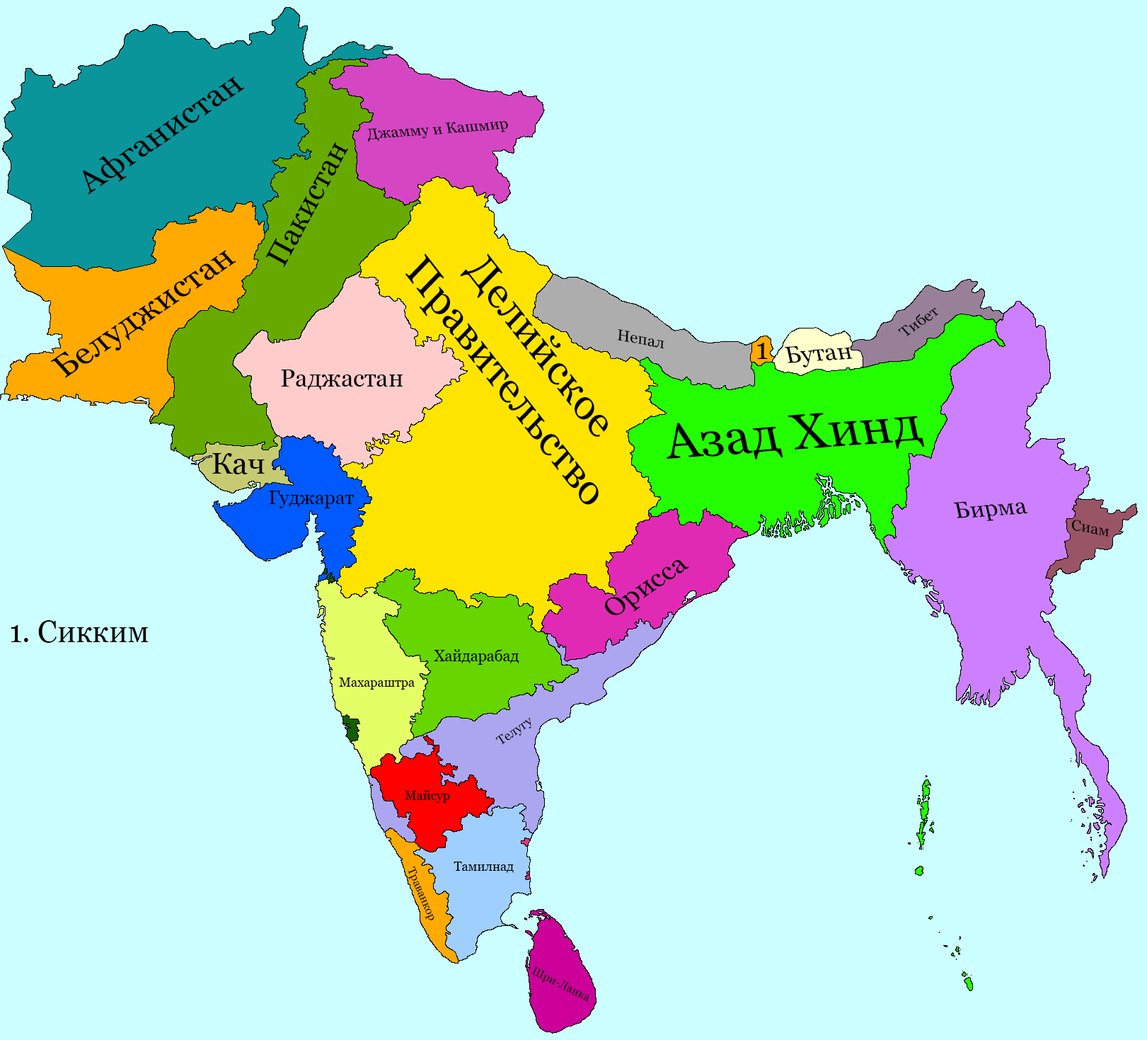
<style>
.page{position:relative;width:1147px;height:1040px;background:#ccffff}
.page>*{position:absolute;margin:0}
.t1{font:32.6px "Georgia";color:#000000;scale:1.03 1}
.t2{font:15.2px "Georgia";color:#000000;scale:1.03 1}
.t3{font:30.3px "Georgia";color:#000000}
.t4{font:41.4px "Georgia";color:#000000;scale:1.03 1}
.t5{font:15.1px "Georgia";color:#000000;scale:1.03 1}
.t6{font:15.7px "Georgia";color:#000000;scale:1.03 1}
.t7{font:29.8px "Georgia";color:#000000}
.t8{font:23.7px "Georgia";color:#000000;scale:1.03 1}
.t9{font:24.6px "Georgia";color:#000000}
.t10{font:50.3px "Georgia";color:#000000;scale:1.03 1}
.t11{font:29.6px "Georgia";color:#000000;scale:1.04 1}
.t12{font:19.1px "Georgia";color:#000000}
.t13{font:22.9px "Georgia";color:#000000;scale:1.03 1}
.t14{font:26.8px "Georgia";color:#000000;scale:1.03 1}
.t15{font:15.3px "Georgia";color:#000000}
.t16{font:12.7px "Georgia";color:#000000}
.t17{font:11.3px "Georgia";color:#000000}
</style>
<div class="page">
<p class="t1" style="left:83px;top:76px;width:162px;height:119px;rotate:-34deg">Афганистан</p>
<p class="t2" style="left:367px;top:120px;width:141px;height:22px;rotate:-4deg">Джамму и Кашмир</p>
<p class="t3" style="left:265px;top:142px;width:83px;height:125px;rotate:-62deg">Пакистан</p>
<p class="t1" style="left:50px;top:250px;width:186px;height:128px;rotate:-34deg">Белуджистан</p>
<p class="t4" style="left:405px;top:253px;width:203px;height:252px;text-align:center;rotate:52deg">Делийское<br>Правительство</p>
<p class="t5" style="left:898px;top:307px;width:41px;height:30px;rotate:-34deg">Тибет</p>
<p class="t6" style="left:617px;top:329px;width:47px;height:20px;rotate:11deg">Непал</p>
<p class="t7" style="left:757px;top:342px;width:11px;height:17px">1</p>
<p class="t8" style="left:784px;top:345px;width:69px;height:22px;rotate:-4deg">Бутан</p>
<p class="t9" style="left:281px;top:369px;width:122px;height:21px">Раджастан</p>
<p class="t10" style="left:667px;top:413px;width:258px;height:46px;rotate:-4deg">Азад Хинд</p>
<p class="t11" style="left:212px;top:453px;width:53px;height:21px">Кач</p>
<p class="t12" style="left:269px;top:490px;width:85px;height:18px">Гуджарат</p>
<p class="t13" style="left:954px;top:501px;width:74px;height:20px;rotate:-4deg">Бирма</p>
<p class="t5" style="left:1071px;top:519px;width:39px;height:17px;rotate:11deg">Сиам</p>
<p class="t14" style="left:605px;top:560px;width:84px;height:55px;rotate:-34deg">Орисса</p>
<p class="t3" style="left:11px;top:620px;width:138px;height:23px">1. Сикким</p>
<p class="t15" style="left:434px;top:649px;width:85px;height:15px">Хайдарабад</p>
<p class="t16" style="left:339px;top:677px;width:76px;height:12px">Махараштра</p>
<p class="t16" style="left:495px;top:717px;width:36px;height:27px;rotate:-34deg">Телугу</p>
<p class="t16" style="left:405px;top:790px;width:45px;height:12px">Майсур</p>
<p class="t17" style="left:408px;top:865px;width:26px;height:55px;rotate:67deg">Траванкор</p>
<p class="t16" style="left:454px;top:861px;width:60px;height:12px">Тамилнад</p>
<p class="t17" style="left:531px;top:966px;width:58px;height:35px;rotate:26deg">Шри-Ланка</p>
</div>
